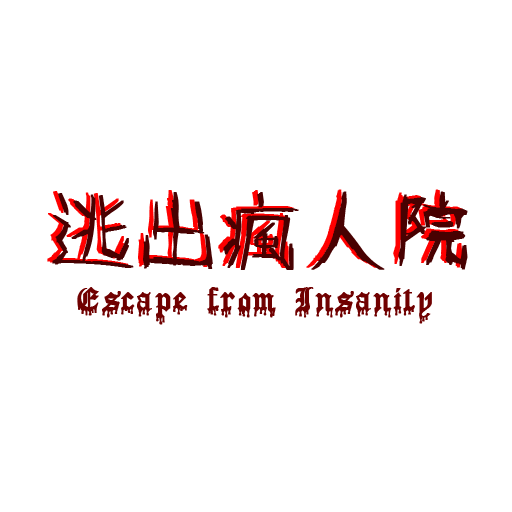
<style>
.page{position:relative;width:512px;height:512px;background:#ffffff}
.page>*{position:absolute;margin:0}
.t1{font:78px "onryou";letter-spacing:0.04em;font-weight:bold}
.t2{font:78px "onryou";letter-spacing:0.04em;color:#480101;font-weight:bold}
.t3{font:33.3px "BloodOfDracula";letter-spacing:0.04em;color:#700000;font-weight:bold}
</style>
<div class="page">
<p class="t1" style="left:47px;top:189px;width:416px;height:79px">逃出瘋人院</p>
<p class="t2" style="left:52px;top:191px;width:416px;height:79px">逃出瘋人院</p>
<p class="t3" style="left:77px;top:287px;width:355px;height:38px">Escape from Insanity</p>
</div>
